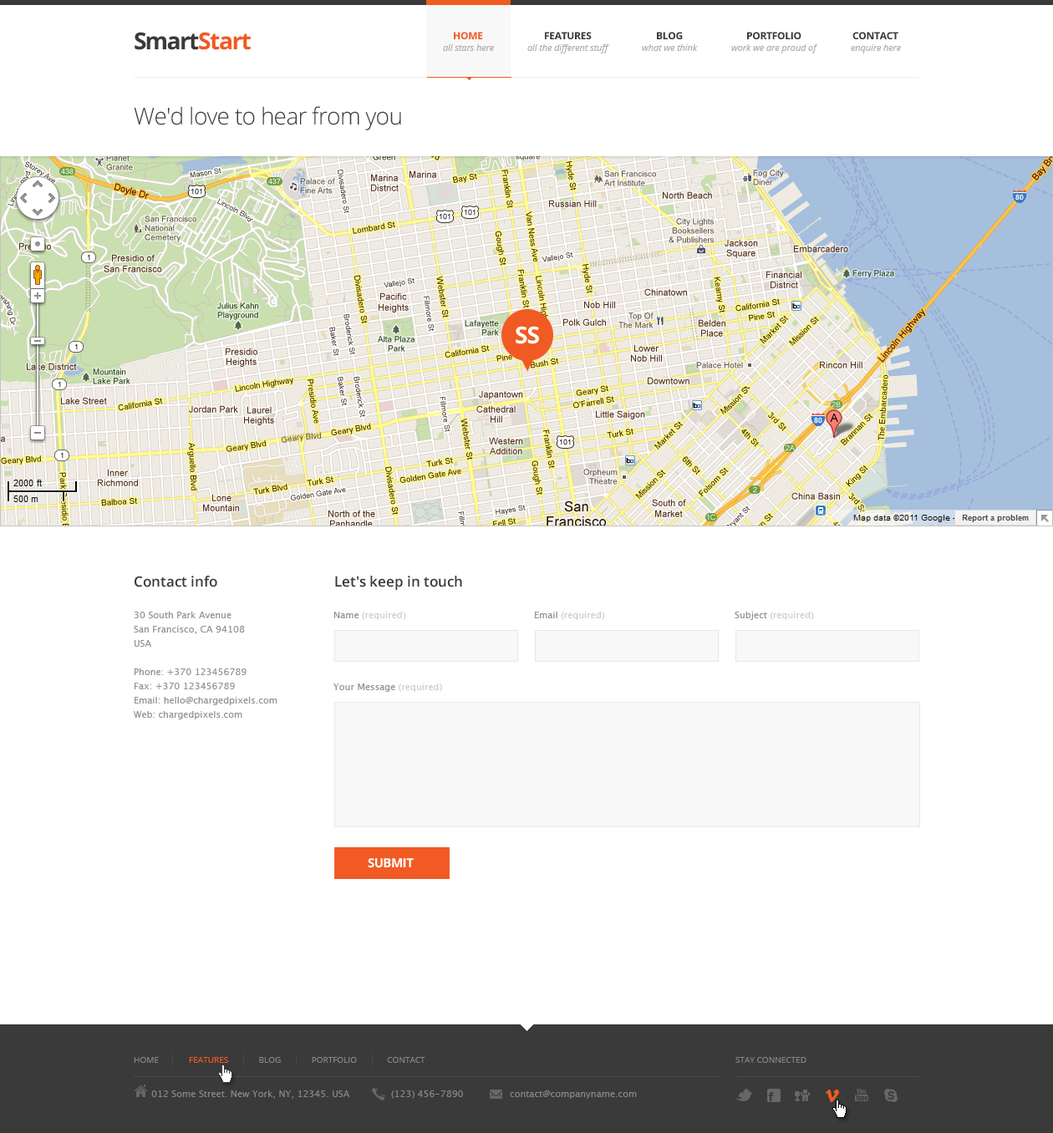
<style>
.page{position:relative;width:1053px;height:1133px;background:#ffffff}
.page>*{position:absolute;margin:0}
.t1{font:23.4px "OpenSans-Bold";letter-spacing:-0.05em;color:#f15a23}
.t2{font:23.4px "OpenSans-Bold";letter-spacing:-0.075em;color:#3a3a3a}
.t3{font:23.4px "OpenSans-Bold";letter-spacing:-0.05em;color:#3a3a3a}
.t4{font:10px "OpenSans-Bold";letter-spacing:-0.025em;color:#f15a23;text-transform:uppercase}
.t5{font:10px "OpenSans-Bold";letter-spacing:-0.025em;color:#3a3a3a;text-transform:uppercase}
.t6{font:9.2px "OpenSans-Italic";letter-spacing:-0.01em;color:#aeaeae}
.t7{font:23.4px "OpenSans-Light";letter-spacing:-0.025em;color:#3a3a3a}
.t8{font:23.4px "OpenSans-Bold";letter-spacing:-0.025em;color:#ffffff}
.t9{font:14.2px "OpenSans-Semibold";color:#3a3a3a}
.t10{font:9.2px/14.2px "LucidaSans";color:#959393}
.t11{font:9.2px "LucidaSans";color:#cecece}
.t12{font:9.2px "LucidaSans";color:#959393}
.t13{font:12.5px "OpenSans-Bold";letter-spacing:-0.025em;color:#ffffff;text-transform:uppercase}
.t14{font:8.4px "OpenSans";color:#868686;text-transform:uppercase}
.t15{font:8.4px "OpenSans";color:#f15a23;text-transform:uppercase}
.t16{font:9.2px "LucidaSans";color:#868686}
</style>
<div class="page">
<p class="t1" style="left:135px;top:32px;width:116px;height:18px"><span class="t2">S</span><span class="t3">mart</span>Start</p>
<p class="t4" style="left:454px;top:32px;width:29px;height:7px">Home</p>
<p class="t5" style="left:545px;top:32px;width:46px;height:7px">Features</p>
<p class="t5" style="left:657px;top:32px;width:26px;height:7px">Blog</p>
<p class="t5" style="left:747px;top:32px;width:54px;height:7px">Portfolio</p>
<p class="t5" style="left:852px;top:32px;width:46px;height:7px">Contact</p>
<p class="t6" style="left:443px;top:44px;width:51px;height:7px">all stars here</p>
<p class="t6" style="left:527px;top:44px;width:82px;height:9px">all the different stuff</p>
<p class="t6" style="left:642px;top:44px;width:56px;height:7px">what we think</p>
<p class="t6" style="left:731px;top:44px;width:87px;height:9px">work we are proud of</p>
<p class="t6" style="left:850px;top:44px;width:51px;height:9px">enquire here</p>
<p class="t7" style="left:134px;top:106px;width:267px;height:24px">We'd love to hear from you</p>
<p class="t8" style="left:515px;top:326px;width:24px;height:18px">SS</p>
<p class="t9" style="left:135px;top:576px;width:82px;height:11px">Contact info</p>
<p class="t9" style="left:335px;top:576px;width:127px;height:14px">Let's keep in touch</p>
<p class="t10" style="left:134px;top:612px;width:143px;height:107px">30 South Park Avenue<br>San Francisco, CA 94108<br>USA<br><br>Phone: +370 123456789<br>Fax: +370 123456789<br>Email: hello@chargedpixels.com<br>Web: chargedpixels.com</p>
<p class="t11" style="left:333px;top:612px;width:73px;height:8px"><span class="t12">Name </span>(required)</p>
<p class="t11" style="left:535px;top:612px;width:70px;height:8px"><span class="t12">Email </span>(required)</p>
<p class="t11" style="left:734px;top:612px;width:80px;height:8px"><span class="t12">Subject </span>(required)</p>
<p class="t12" style="left:333px;top:683px;width:109px;height:9px">Your Message <span class="t11">(required)</span></p>
<p class="t13" style="left:368px;top:858px;width:46px;height:10px">Submit</p>
<p class="t14" style="left:134px;top:1057px;width:291px;height:6px">Home              <span class="t15">Features</span>              Blog              Portfolio              Contact</p>
<p class="t14" style="left:735px;top:1057px;width:71px;height:6px">Stay connected</p>
<p class="t16" style="left:151px;top:1090px;width:199px;height:9px">012 Some Street. New York, NY, 12345. USA</p>
<p class="t16" style="left:391px;top:1090px;width:72px;height:9px">(123) 456-7890</p>
<p class="t16" style="left:510px;top:1090px;width:127px;height:9px">contact@companyname.com</p>
</div>
